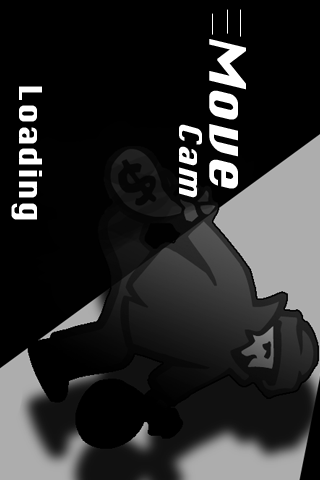
<style>
.page{position:relative;width:320px;height:480px;background:#000000}
.page>*{position:absolute;margin:0}
.t1{font:49.4px "Krungthep";letter-spacing:0.025em;color:#ffffff;font-weight:bold}
.t2{font:30px "Krungthep";letter-spacing:0.025em;color:#ffffff;font-weight:bold}
.t3{font:31.1px "Krungthep";letter-spacing:0.025em;color:#ffffff;font-weight:bold;scale:0.96 1}
</style>
<div class="page">
<p class="t1" style="left:209px;top:39px;width:37px;height:150px;rotate:90deg">Move</p>
<p class="t2" style="left:11px;top:86px;width:31px;height:134px;rotate:90deg">Loading</p>
<p class="t3" style="left:179px;top:124px;width:23px;height:74px;rotate:90deg">Cam</p>
</div>
